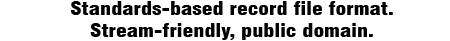
<style>
.page{position:relative;width:450px;height:41px;background:#ffffff}
.page>*{position:absolute;margin:0}
.t1{font:18px "Swiss721BT-BlackCondensed";color:#000000;scale:1.2 1}
</style>
<div class="page">
<p class="t1" style="left:71px;top:1px;width:322px;height:39px;text-align:center">Standards-based record file format.<br>Stream-friendly, public domain.</p>
</div>
